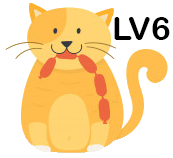
<style>
.page{position:relative;width:173px;height:158px;background:#ffffff}
.page>*{position:absolute;margin:0}
.t1{font:31.6px "ArialRoundedMTBold";color:#000000;scale:1.05 1}
</style>
<div class="page">
<p class="t1" style="left:114px;top:17px;width:56px;height:23px">LV6</p>
</div>
